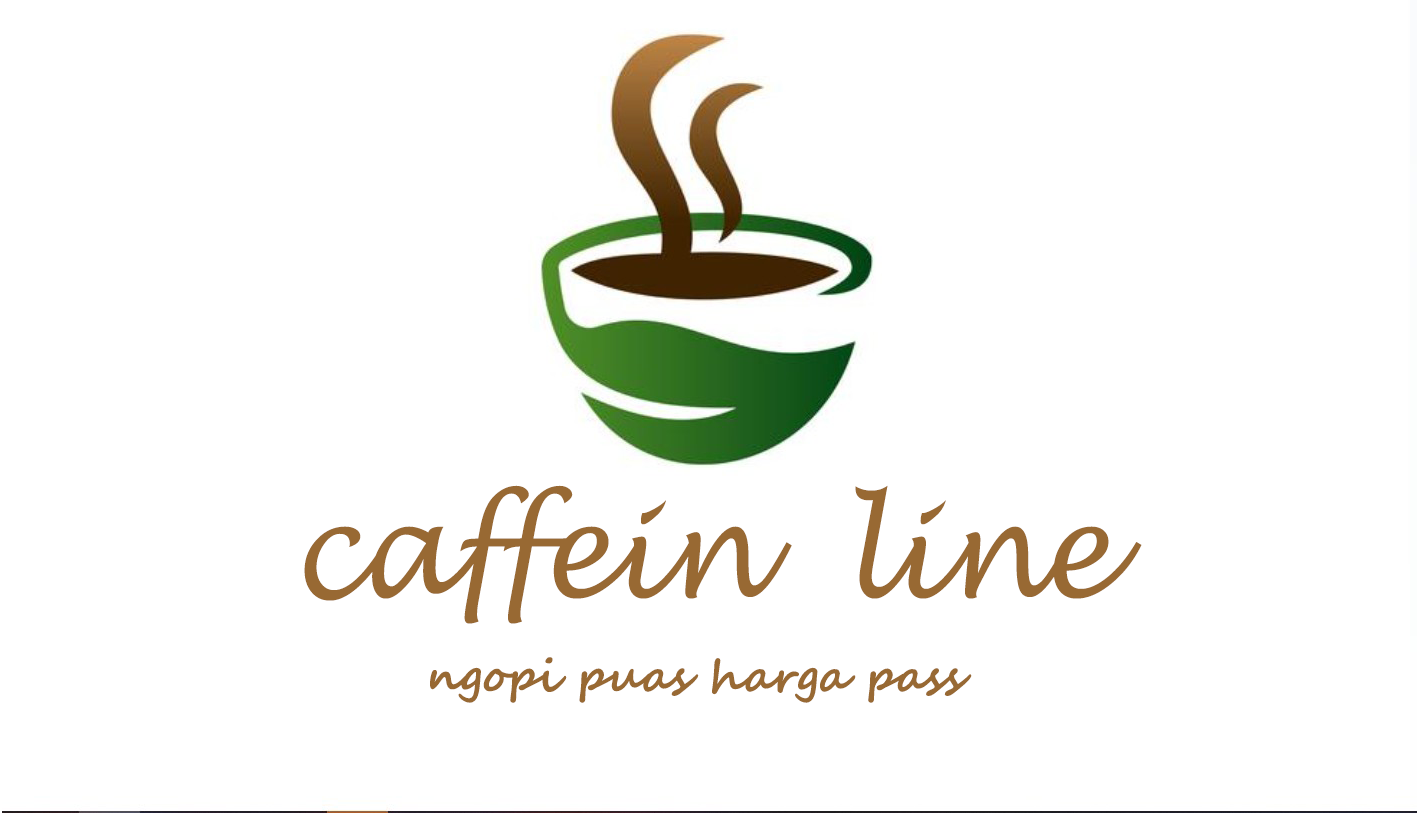
<style>
.page{position:relative;width:1417px;height:813px;background:#ffffff}
.page>*{position:absolute;margin:0}
.t1{font:129.8px "LucidaHandwriting-Italic";color:#986933;scale:0.92 1}
.t2{font:77.9px "TrajanPro-Bold";color:#090001;scale:0.92 1}
.t3{font:45px "SegoeScript-Bold";color:#986933}
.t4{font:45px "LucidaHandwriting-Italic";color:#090001}
</style>
<div class="page">
<p class="t1" style="left:304px;top:485px;width:838px;height:139px"><span class="t2">            </span>caffein  line</p>
<p class="t3" style="left:430px;top:657px;width:542px;height:46px"><span class="t4">                       </span>ngopi puas harga pass<br><br><span class="t4"><br><br>haidhaidhaddnqwnn</span></p>
</div>
